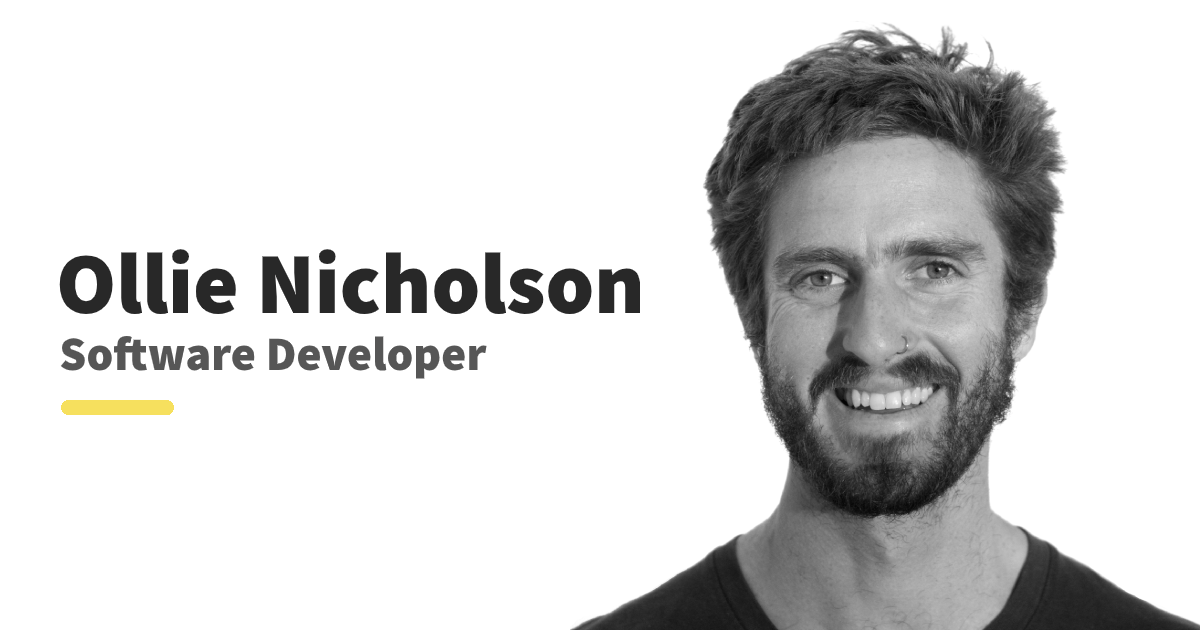
<style>
.page{position:relative;width:1200px;height:630px;background:#ffffff}
.page>*{position:absolute;margin:0}
.t1{font:87px "SourceSansPro-Black";color:#282828}
.t2{font:48px "SourceSansPro-Black";color:#565656}
</style>
<div class="page">
<p class="t1" style="left:59px;top:249px;width:582px;height:66px">Ollie Nicholson</p>
<p class="t2" style="left:60px;top:336px;width:427px;height:43px">Software Developer</p>
</div>
